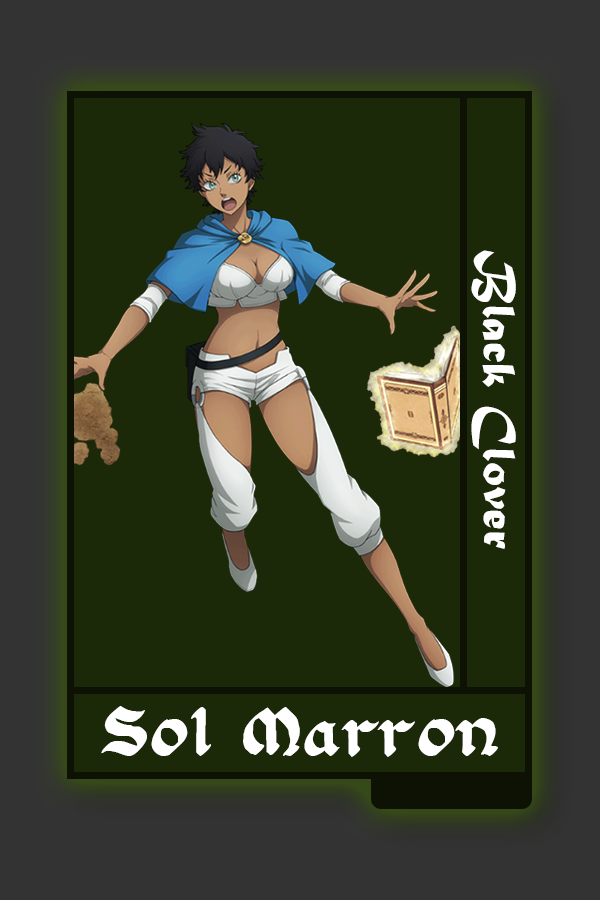
<style>
.page{position:relative;width:600px;height:900px;background:#1b2908}
.page>*{position:absolute;margin:0}
.t1{font:48.8px "MaturaMTScriptCapitals";color:#ffffff}
.t2{font:59.7px "FloranteatLaura";color:#ffffff}
</style>
<div class="page">
<p class="t1" style="left:471px;top:250px;width:45px;height:299px;rotate:90deg">Black Clover</p>
<p class="t2" style="left:101px;top:706px;width:397px;height:51px">Sol Marron</p>
</div>
